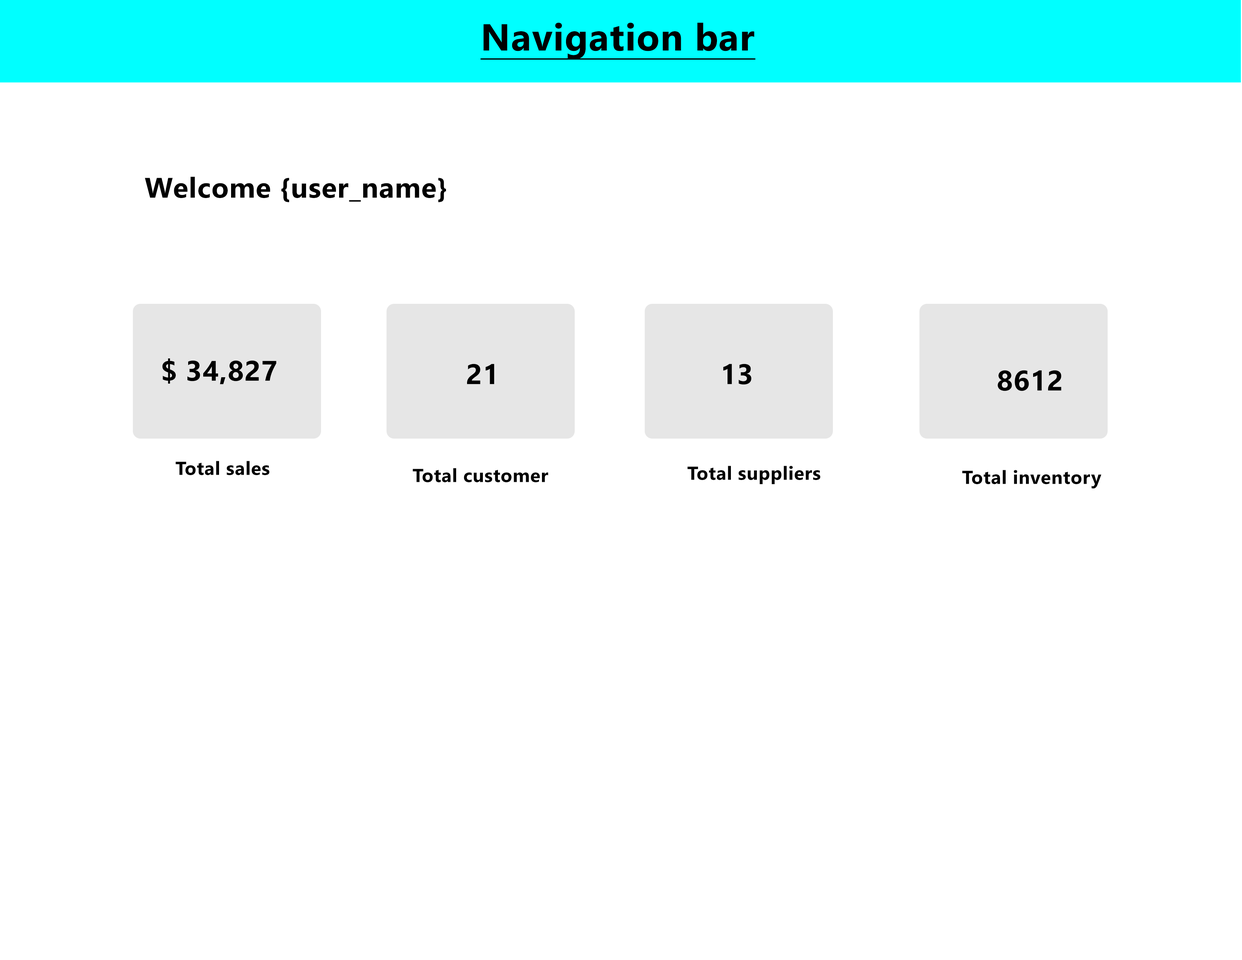
<style>
.page{position:relative;width:1242px;height:960px;background:#ffffff}
.page>*{position:absolute;margin:0}
.t1{font:37.6px "NirmalaUI-Bold";letter-spacing:0.02em;color:#000000;text-decoration:underline}
.t2{font:28.2px "NirmalaUI-Bold";letter-spacing:0.02em;color:#000000}
.t3{font:18.8px "NirmalaUI-Bold";letter-spacing:0.02em;color:#000000}
</style>
<div class="page">
<p class="t1" style="left:480px;top:23px;width:276px;height:37px">Navigation bar</p>
<p class="t2" style="left:145px;top:177px;width:301px;height:25px">Welcome {user_name}</p>
<p class="t2" style="left:162px;top:358px;width:114px;height:26px">$ 34,827</p>
<p class="t2" style="left:467px;top:364px;width:27px;height:20px">21</p>
<p class="t2" style="left:723px;top:364px;width:29px;height:21px">13</p>
<p class="t2" style="left:998px;top:370px;width:64px;height:21px">8612</p>
<p class="t3" style="left:175px;top:461px;width:95px;height:14px">Total sales</p>
<p class="t3" style="left:413px;top:468px;width:135px;height:14px">Total customer</p>
<p class="t3" style="left:687px;top:466px;width:134px;height:18px">Total suppliers</p>
<p class="t3" style="left:962px;top:470px;width:140px;height:19px">Total inventory</p>
</div>
